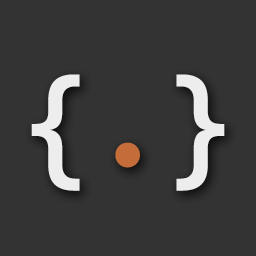
<style>
.page{position:relative;width:256px;height:256px;background:#333333}
.page>*{position:absolute;margin:0}
.t1{font:128px "Consolas-Bold";color:#ededed}
.t2{font:128px "Consolas-Bold";color:#c56d3a}
</style>
<div class="page">
<p class="t1" style="left:31px;top:74px;width:194px;height:117px">{<span class="t2">.</span>}</p>
</div>
